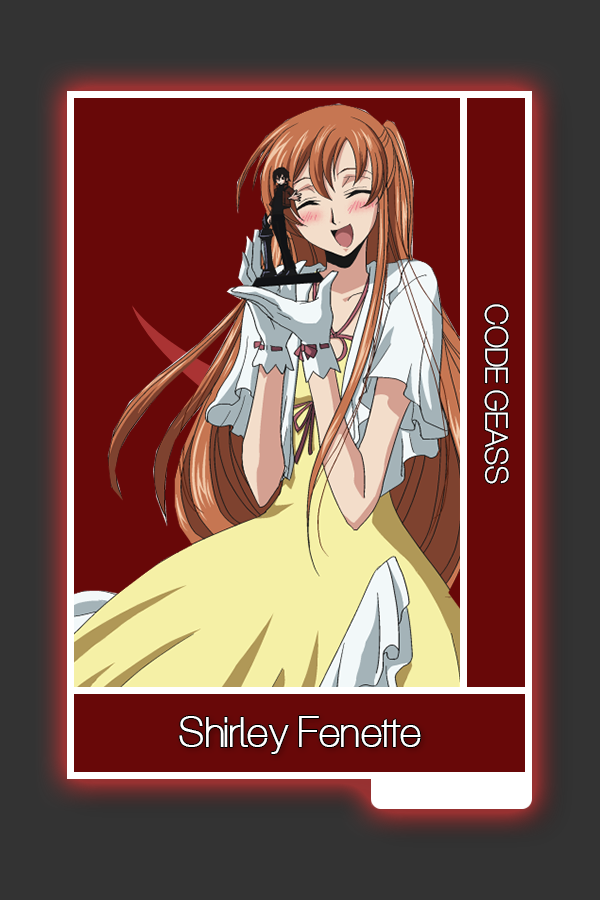
<style>
.page{position:relative;width:600px;height:900px;background:#680808}
.page>*{position:absolute;margin:0}
.t1{font:31.2px "Aliquam";color:#ffffff}
.t2{font:43.2px "Aliquam";color:#ffffff}
</style>
<div class="page">
<p class="t1" style="left:484px;top:304px;width:25px;height:180px;rotate:90deg">CODE GEASS</p>
<p class="t2" style="left:179px;top:716px;width:242px;height:38px">Shirley Fenette</p>
</div>
